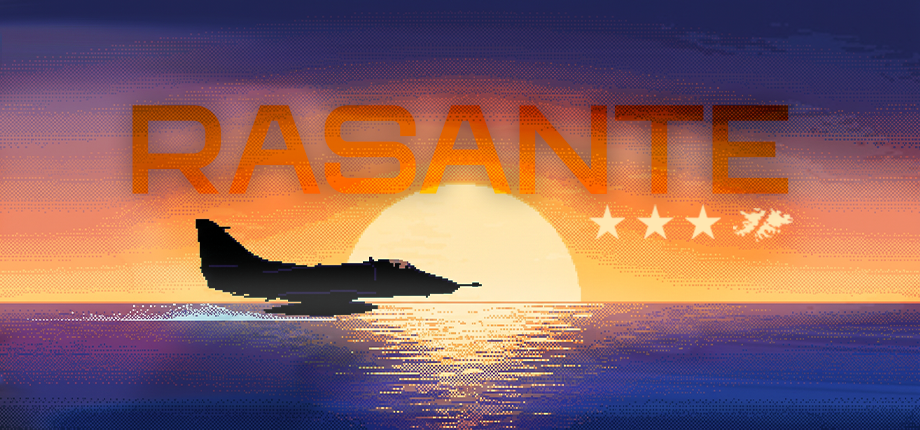
<style>
.page{position:relative;width:920px;height:430px}
.page>*{position:absolute;margin:0}
.t1{font:110.9px "KIRANA";letter-spacing:-0.007em}
</style>
<div class="page">
<p class="t1" style="left:132px;top:105px;width:657px;height:89px">RASANTE</p>
</div>
